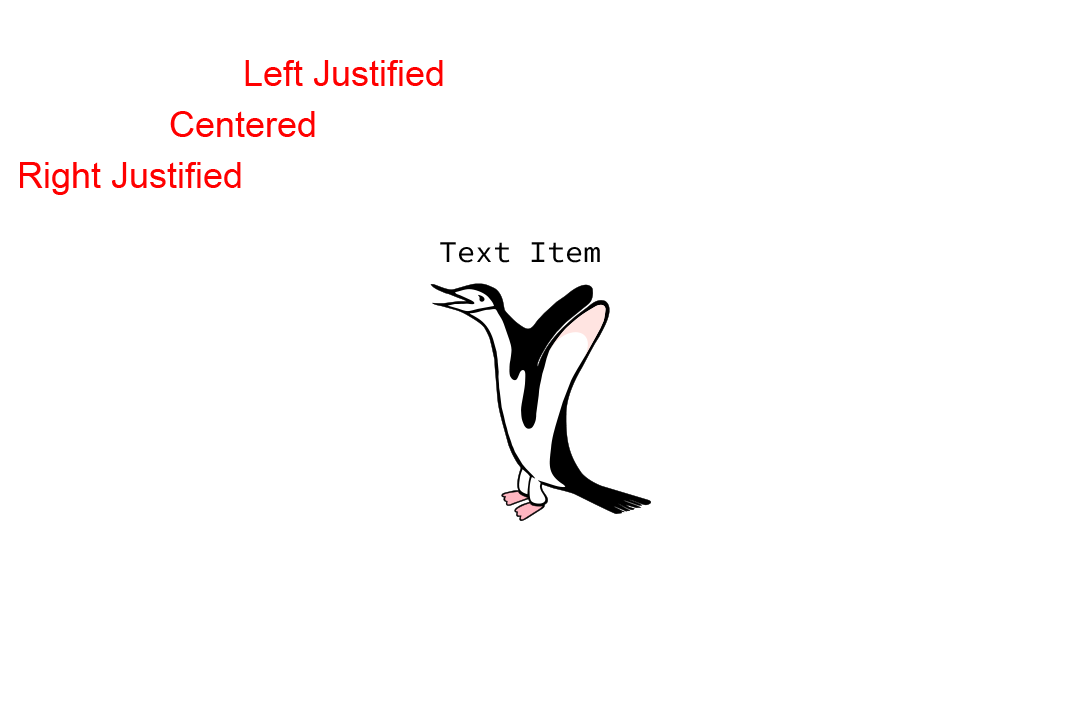
<style>
.page{position:relative;width:1080px;height:720px;background:#ffffff}
.page>*{position:absolute;margin:0}
.t1{font:36px "ArialMT";color:#ff0000}
.t2{font:30px "SourceCodePro-Regular";color:#000000}
</style>
<div class="page">
<p class="t1" style="left:245px;top:60px;width:198px;height:26px">Left Justified</p>
<p class="t1" style="left:170px;top:111px;width:145px;height:26px">Centered</p>
<p class="t1" style="left:20px;top:162px;width:221px;height:33px">Right Justified</p>
<p class="t2" style="left:440px;top:242px;width:160px;height:21px">Text Item</p>
</div>
